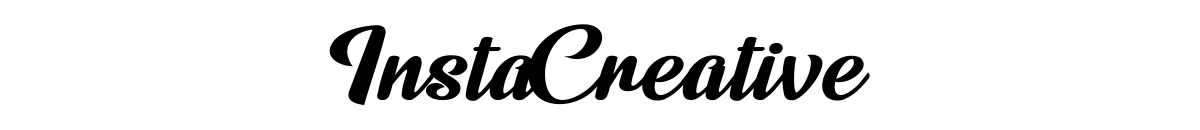
<style>
.page{position:relative;width:1200px;height:130px;background:#ffffff}
.page>*{position:absolute;margin:0}
.t1{font:150px "LemonJellyPersonalUse";color:#000000}
</style>
<div class="page">
<p class="t1" style="left:329px;top:24px;width:541px;height:81px">InstaCreative</p>
</div>
